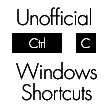
<style>
.page{position:relative;width:108px;height:108px;background:#ffffff}
.page>*{position:absolute;margin:0}
.t1{font:20.8px "FuturaLT-Light";letter-spacing:-0.025em;color:#000000}
.t2{font:12.5px "FuturaLT-Light";letter-spacing:-0.025em;color:#ffffff}
</style>
<div class="page">
<p class="t1" style="left:17px;top:7px;width:74px;height:19px">Unofficial</p>
<p class="t1" style="left:17px;top:7px;width:74px;height:19px">Unofficial</p>
<p class="t1" style="left:17px;top:7px;width:74px;height:19px">Unofficial</p>
<p class="t2" style="left:29px;top:37px;width:16px;height:11px">Ctrl</p>
<p class="t2" style="left:29px;top:37px;width:16px;height:11px">Ctrl</p>
<p class="t2" style="left:29px;top:37px;width:16px;height:11px">Ctrl</p>
<p class="t2" style="left:81px;top:38px;width:9px;height:10px">C</p>
<p class="t2" style="left:81px;top:38px;width:9px;height:10px">C</p>
<p class="t2" style="left:81px;top:38px;width:9px;height:10px">C</p>
<p class="t1" style="left:16px;top:62px;width:81px;height:18px">Windows</p>
<p class="t1" style="left:16px;top:62px;width:81px;height:18px">Windows</p>
<p class="t1" style="left:16px;top:62px;width:81px;height:18px">Windows</p>
<p class="t1" style="left:22px;top:83px;width:70px;height:18px">Shortcuts</p>
<p class="t1" style="left:22px;top:83px;width:70px;height:18px">Shortcuts</p>
<p class="t1" style="left:22px;top:83px;width:70px;height:18px">Shortcuts</p>
</div>
